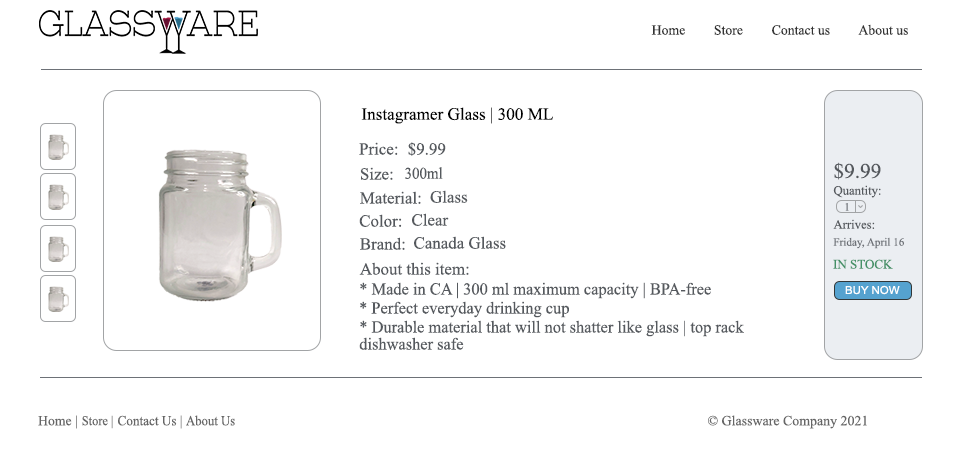
<style>
.page{position:relative;width:960px;height:450px;background:#ffffff}
.page>*{position:absolute;margin:0}
.t1{font:14px "TimesNewRomanPSMT";color:#333333}
.t2{font:17.3px "TimesNewRomanPSMT";color:#000000}
.t3{font:16.9px "TimesNewRomanPSMT";color:#55595e}
.t4{font:16.5px "TimesNewRomanPSMT";color:#55595e;scale:0.91 1}
.t5{font:20.7px "TimesNewRomanPSMT";color:#55595e}
.t6{font:12.7px "TimesNewRomanPSMT";color:#55595e}
.t7{font:11.2px "TimesNewRomanPSMT"}
.t8{font:11.2px "TimesNewRomanPSMT";color:#6d7177}
.t9{font:13px "TimesNewRomanPSMT";color:#449167}
.t10{font:16.9px "TimesNewRomanPSMT";color:#55595e;scale:0.97 1}
.t11{font:10.9px "ArialMT";color:#ffffff;scale:1.05 1}
.t12{font:16.9px/17px "TimesNewRomanPSMT";color:#55595e;scale:0.97 1}
.t13{font:14px "TimesNewRomanPSMT";color:#666666}
.t14{font:13.5px "TimesNewRomanPSMT";color:#666666;scale:0.92 1}
.t15{font:14px "TimesNewRomanPSMT";color:#666666;scale:0.94 1}
.t16{font:14px "TimesNewRomanPSMT";color:#666666;scale:0.91 1}
</style>
<div class="page">
<p class="t1" style="left:651px;top:25px;width:34px;height:10px">Home</p>
<p class="t1" style="left:714px;top:25px;width:29px;height:10px">Store</p>
<p class="t1" style="left:772px;top:25px;width:58px;height:10px">Contact us</p>
<p class="t1" style="left:858px;top:24px;width:50px;height:11px">About us</p>
<p class="t2" style="left:361px;top:107px;width:192px;height:17px">Instagramer Glass | 300 ML</p>
<p class="t3" style="left:359px;top:142px;width:39px;height:13px">Price:</p>
<p class="t3" style="left:408px;top:142px;width:38px;height:14px">$9.99</p>
<p class="t3" style="left:360px;top:167px;width:33px;height:13px">Size:</p>
<p class="t4" style="left:405px;top:167px;width:38px;height:12px">300ml</p>
<p class="t5" style="left:834px;top:162px;width:47px;height:18px">$9.99</p>
<p class="t6" style="left:833px;top:185px;width:48px;height:13px">Quantity:</p>
<p class="t3" style="left:360px;top:191px;width:61px;height:13px">Material:</p>
<p class="t3" style="left:430px;top:190px;width:38px;height:13px">Glass</p>
<p class="t7" style="left:845px;top:203px;width:4px;height:8px">1</p>
<p class="t3" style="left:359px;top:214px;width:43px;height:13px">Color:</p>
<p class="t3" style="left:412px;top:213px;width:37px;height:13px">Clear</p>
<p class="t6" style="left:833px;top:219px;width:42px;height:10px">Arrives:</p>
<p class="t3" style="left:360px;top:237px;width:45px;height:13px">Brand:</p>
<p class="t3" style="left:414px;top:236px;width:92px;height:13px">Canada Glass</p>
<p class="t8" style="left:833px;top:237px;width:71px;height:12px">Friday, April 16</p>
<p class="t3" style="left:359px;top:262px;width:110px;height:13px">About this item:</p>
<p class="t9" style="left:833px;top:259px;width:60px;height:10px">IN STOCK</p>
<p class="t10" style="left:360px;top:282px;width:351px;height:17px">* Made in CA | 300 ml maximum capacity | BPA-free</p>
<p class="t11" style="left:845px;top:285px;width:55px;height:10px">BUY NOW</p>
<p class="t10" style="left:360px;top:301px;width:209px;height:17px">* Perfect everyday drinking cup</p>
<p class="t12" style="left:359px;top:320px;width:385px;height:30px">* Durable material that will not shatter like glass | top rack <br>dishwasher safe</p>
<p class="t13" style="left:38px;top:415px;width:39px;height:14px">Home |</p>
<p class="t14" style="left:82px;top:415px;width:31px;height:14px">Store |</p>
<p class="t15" style="left:118px;top:415px;width:64px;height:14px">Contact Us |</p>
<p class="t16" style="left:186px;top:415px;width:49px;height:11px">About Us</p>
<p class="t13" style="left:708px;top:415px;width:159px;height:14px">© Glassware Company 2021</p>
</div>
